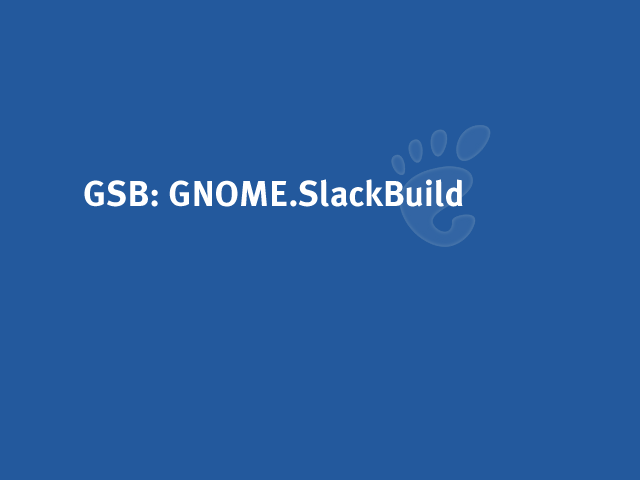
<style>
.page{position:relative;width:640px;height:480px;background:#23599d}
.page>*{position:absolute;margin:0}
.t1{font:36px "MetaPlusBold-Roman";color:#ffffff}
</style>
<div class="page">
<p class="t1" style="left:84px;top:179px;width:379px;height:28px">GSB: GNOME.SlackBuild</p>
</div>
